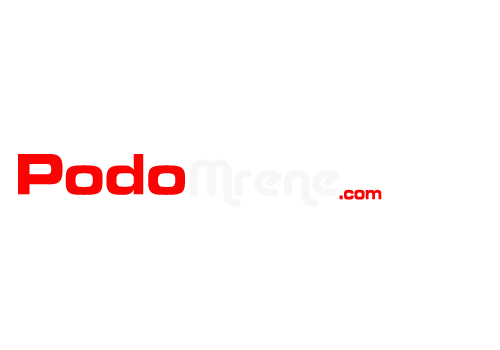
<style>
.page{position:relative;width:500px;height:350px;background:#ffffff}
.page>*{position:absolute;margin:0}
.t1{font:60px "EurostileMN-ExtendedBold";color:#f90303;scale:0.91 1}
.t2{font:50px "Alba";color:#f8f6f6;scale:1.16 1}
.t3{font:19.5px "EurostileMN-ExtendedBold";color:#f90303;scale:0.76 1}
</style>
<div class="page">
<p class="t1" style="left:18px;top:154px;width:167px;height:41px">Podo</p>
<p class="t2" style="left:190px;top:159px;width:150px;height:48px">Mrene</p>
<p class="t3" style="left:339px;top:189px;width:43px;height:11px">.com</p>
</div>
